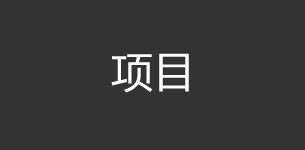
<style>
.page{position:relative;width:305px;height:150px;background:#333333}
.page>*{position:absolute;margin:0}
.t1{font:41.7px "MicrosoftYaHei";color:#ffffff}
</style>
<div class="page">
<p class="t1" style="left:111px;top:53px;width:78px;height:40px">项目</p>
</div>
